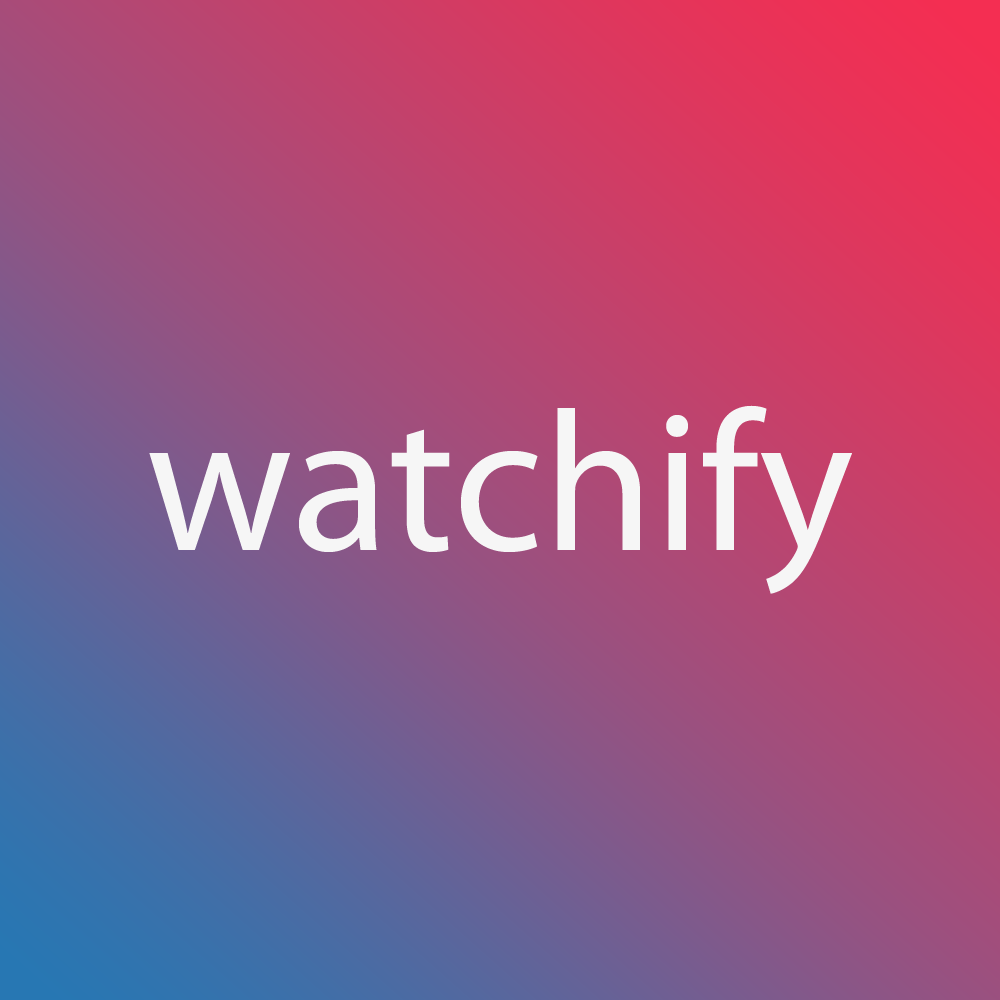
<style>
.page{position:relative;width:1000px;height:1000px}
.page>*{position:absolute;margin:0}
.t1{font:200px "MyriadPro-Regular";color:#f6f6f6}
</style>
<div class="page">
<p class="t1" style="left:149px;top:405px;width:703px;height:189px">watchify</p>
</div>
